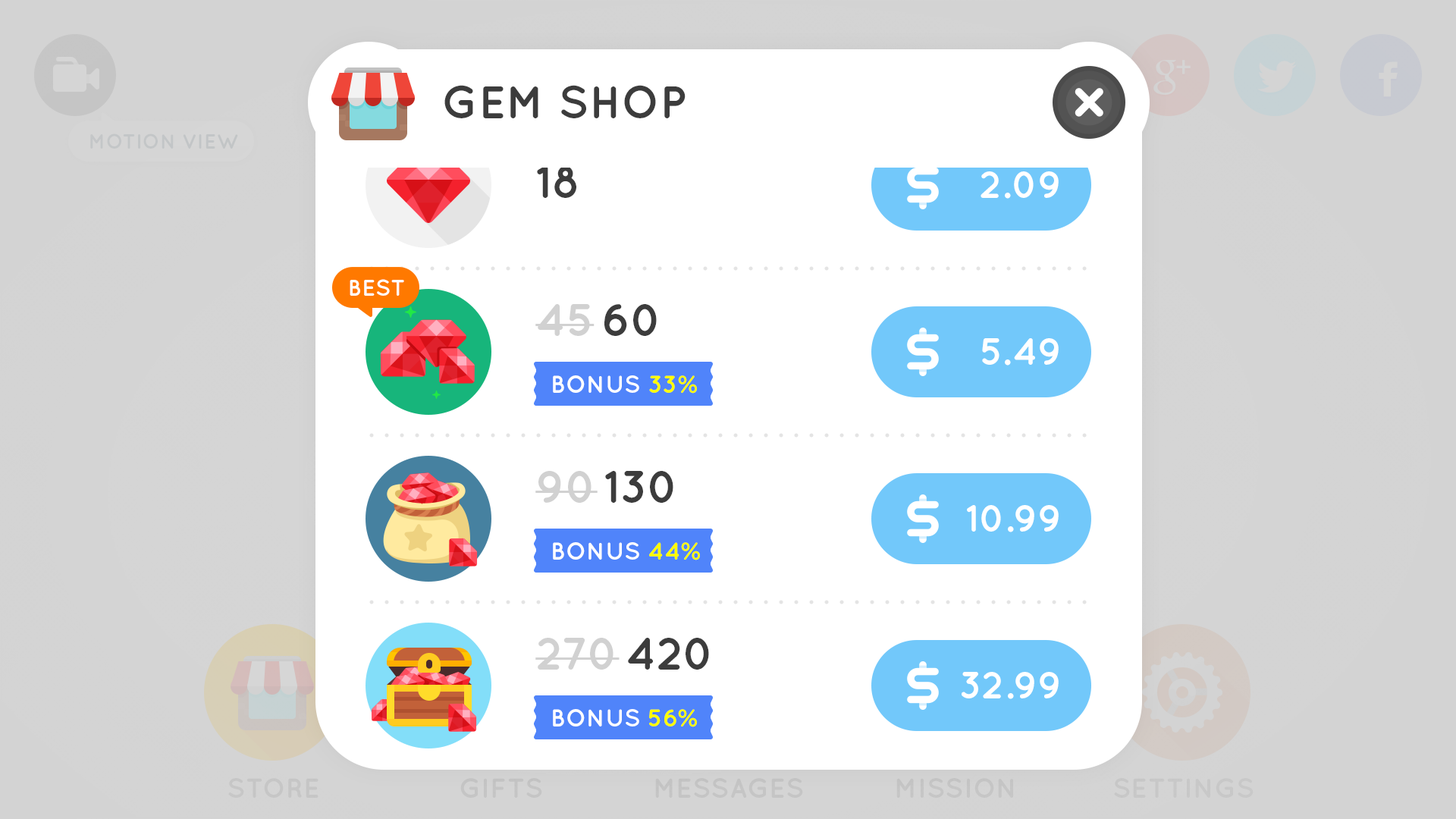
<style>
.page{position:relative;width:1456px;height:819px;background:#ffffff}
.page>*{position:absolute;margin:0}
.t1{font:45.5px "Quicksand-Bold";color:#3c3c3c;text-transform:uppercase}
.t2{font:45.5px "Quicksand-Bold";color:#3c3c3c}
.t3{font:37.9px "Quicksand-Bold";color:#ffffff}
.t4{font:22.7px "Quicksand-Bold";color:#ffffff;text-transform:uppercase}
.t5{font:45.5px "Quicksand-Bold";color:#d1d1d1}
.t6{font:24.3px "Quicksand-Bold";color:#ffffff;text-transform:uppercase}
.t7{font:24.3px "Quicksand-Bold";color:#fffd00;text-transform:uppercase}
</style>
<div class="page">
<p class="t1" style="left:444px;top:85px;width:242px;height:33px">GEM SHOP</p>
<p class="t2" style="left:537px;top:166px;width:39px;height:32px">18</p>
<p class="t3" style="left:981px;top:171px;width:78px;height:28px">2.09</p>
<p class="t4" style="left:350px;top:279px;width:54px;height:17px">BEST</p>
<p class="t5" style="left:535px;top:304px;width:60px;height:32px">45</p>
<p class="t2" style="left:604px;top:304px;width:53px;height:32px">60</p>
<p class="t3" style="left:982px;top:338px;width:77px;height:28px">5.49</p>
<p class="t6" style="left:553px;top:375px;width:144px;height:19px">Bonus <span class="t7">33%</span></p>
<p class="t5" style="left:535px;top:471px;width:63px;height:32px">90</p>
<p class="t2" style="left:605px;top:471px;width:68px;height:32px">130</p>
<p class="t3" style="left:967px;top:505px;width:92px;height:27px">10.99</p>
<p class="t6" style="left:553px;top:542px;width:147px;height:18px">Bonus <span class="t7">44%</span></p>
<p class="t5" style="left:535px;top:638px;width:85px;height:32px">270</p>
<p class="t2" style="left:628px;top:638px;width:81px;height:32px">420</p>
<p class="t3" style="left:962px;top:672px;width:97px;height:27px">32.99</p>
<p class="t6" style="left:553px;top:709px;width:144px;height:18px">Bonus <span class="t7">56%</span></p>
</div>
